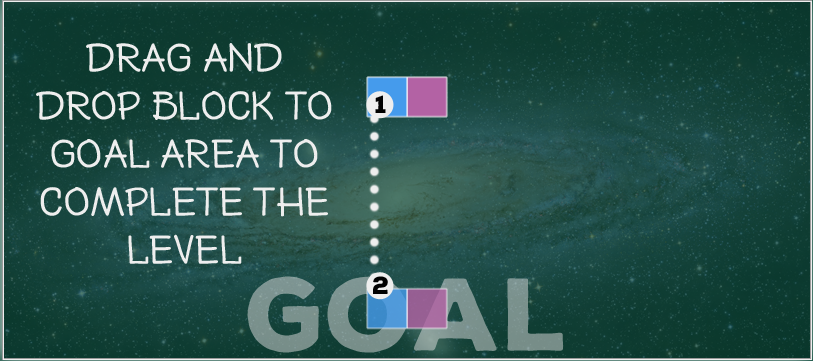
<style>
.page{position:relative;width:813px;height:361px}
.page>*{position:absolute;margin:0}
.t1{font:40px "NexaRustHandmade-Extended";color:#eeeeee}
.t2{font:24px "NexaRustSans-Black";color:#000000}
</style>
<div class="page">
<p class="t1" style="left:36px;top:43px;width:296px;height:221px;text-align:center">DRAG AND DROP BLOCK TO GOAL AREA TO COMPLETE THE LEVEL</p>
<p class="t2" style="left:375px;top:95px;width:11px;height:18px">1</p>
<p class="t2" style="left:373px;top:276px;width:15px;height:18px">2</p>
</div>
